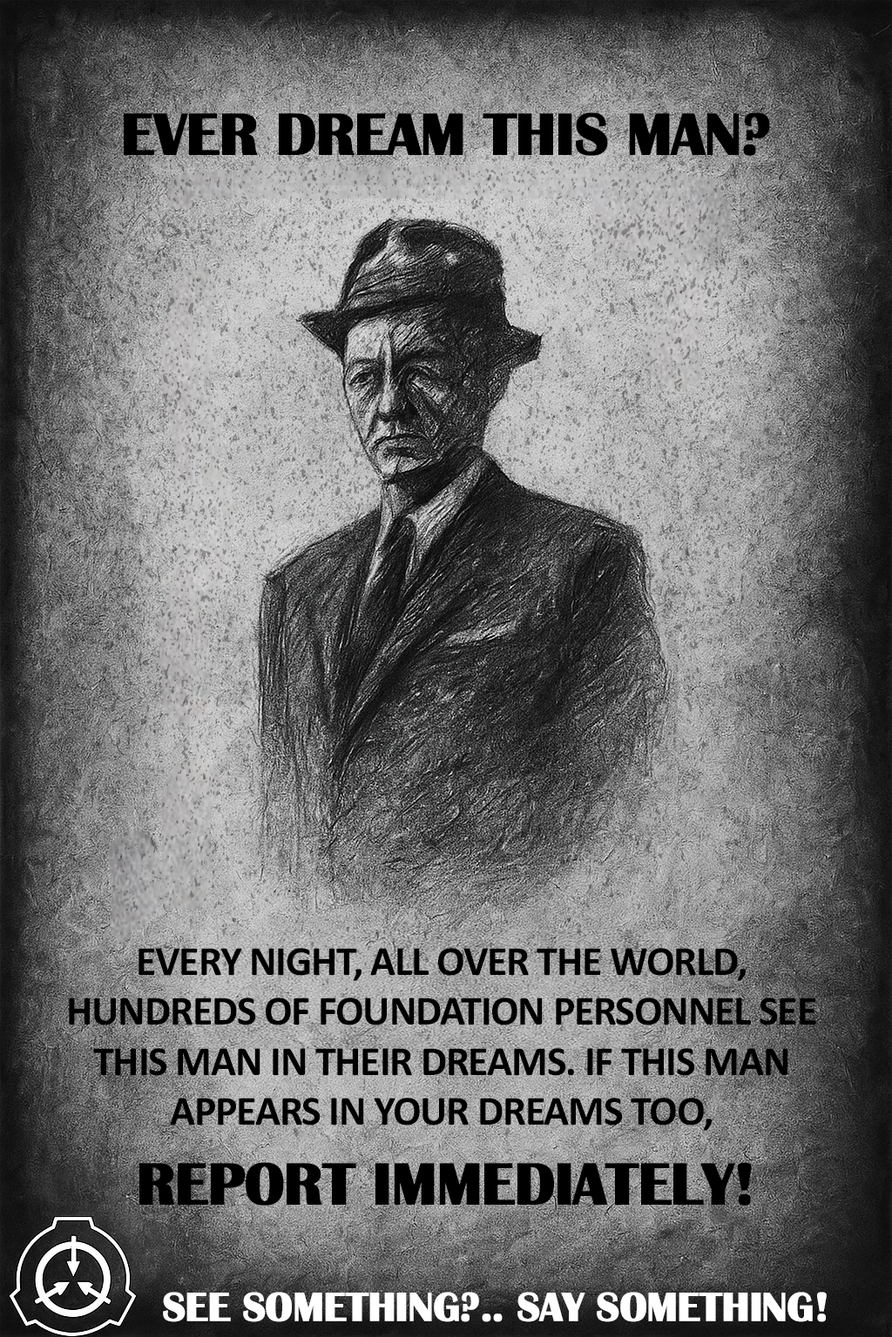
<style>
.page{position:relative;width:892px;height:1337px}
.page>*{position:absolute;margin:0}
.t1{font:60.9px "BritannicBold";letter-spacing:-0.025em;color:#000000;text-transform:uppercase;font-weight:bold}
.t2{font:41.8px "Calibri-Bold";letter-spacing:-0.025em;color:#000000;text-transform:uppercase}
.t3{font:41.8px "BritannicBold";letter-spacing:-0.025em;color:#ffffff;text-transform:uppercase;font-weight:bold}
</style>
<div class="page">
<p class="t1" style="left:124px;top:112px;width:646px;height:44px">EVER DREAM THIS MAN?</p>
<p class="t2" style="left:69px;top:948px;width:747px;height:183px;text-align:center">Every night, all over the world, hundreds of Foundation personnel see this MAN in their dreams. If this man appears in your dreams too,</p>
<p class="t1" style="left:139px;top:1162px;width:612px;height:44px">Report immediately!</p>
<p class="t3" style="left:163px;top:1292px;width:663px;height:31px">See something?.. Say something!</p>
</div>
